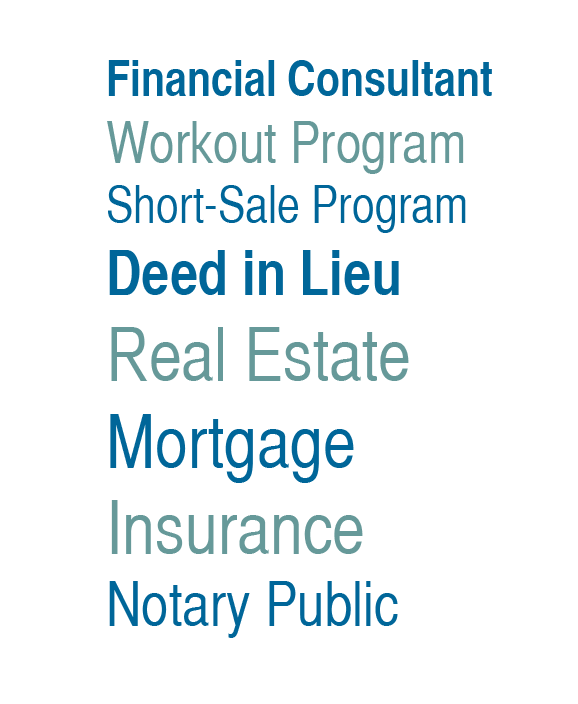
<style>
.page{position:relative;width:578px;height:704px;background:#ffffff}
.page>*{position:absolute;margin:0}
.t1{font:48px "HelveticaCYBold";color:#006699}
.t2{font:56px "HelveticaCYPlain";color:#669999}
.t3{font:50px "HelveticaCYPlain";color:#006699}
.t4{font:60px "HelveticaCYBold";color:#006699}
.t5{font:72px "HelveticaCYPlain";color:#669999}
.t6{font:72px "HelveticaCYPlain";color:#006699}
.t7{font:60px "HelveticaCYPlain";color:#006699}
</style>
<div class="page">
<p class="t1" style="left:107px;top:60px;width:385px;height:578px">Financial Consultant<br> <span class="t2">Workout Program<br> </span><span class="t3">Short-Sale Program<br> </span><span class="t4">Deed in Lieu<br></span><span class="t5"> Real Estate<br></span><span class="t6"> Mortgage<br> </span><span class="t5">Insurance<br></span><span class="t7"> Notary Public</span></p>
</div>
